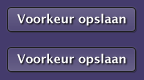
<style>
.page{position:relative;width:144px;height:80px;background:#443b6c}
.page>*{position:absolute;margin:0}
.t1{font:12px "LucidaGrande-Bold";color:#ffffff}
</style>
<div class="page">
<p class="t1" style="left:17px;top:13px;width:109px;height:13px">Voorkeur opslaan</p>
<p class="t1" style="left:17px;top:53px;width:109px;height:13px">Voorkeur opslaan</p>
</div>
